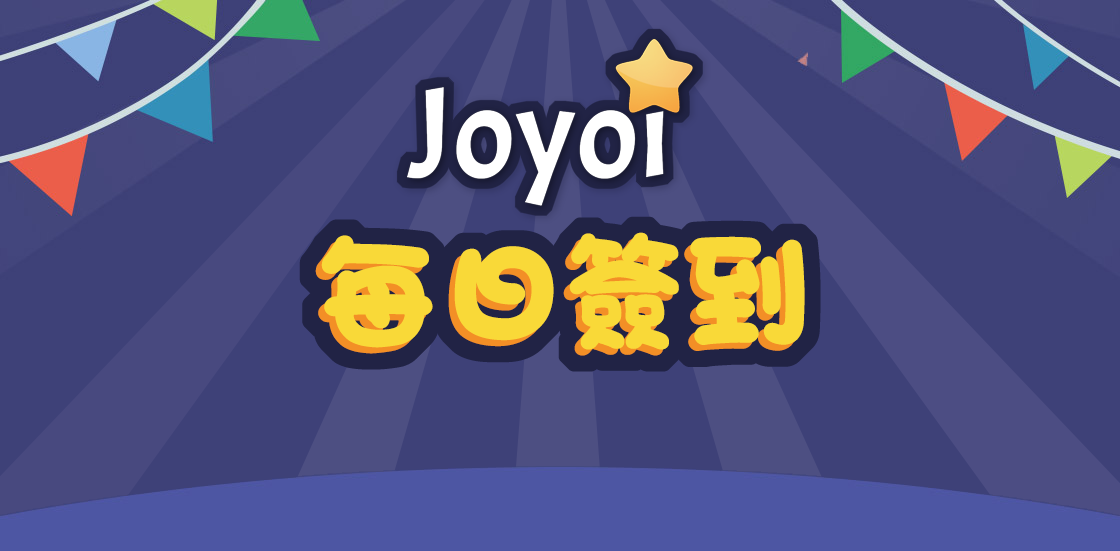
<style>
.page{position:relative;width:1120px;height:551px;background:#3e4178}
.page>*{position:absolute;margin:0}
.t1{font:123.4px "ARTianniuB5-Ultra";color:#f9d938}
</style>
<div class="page">
<p class="t1" style="left:321px;top:232px;width:484px;height:118px">每日簽到</p>
<p class="t1" style="left:315px;top:238px;width:484px;height:118px">每日簽到</p>
</div>
